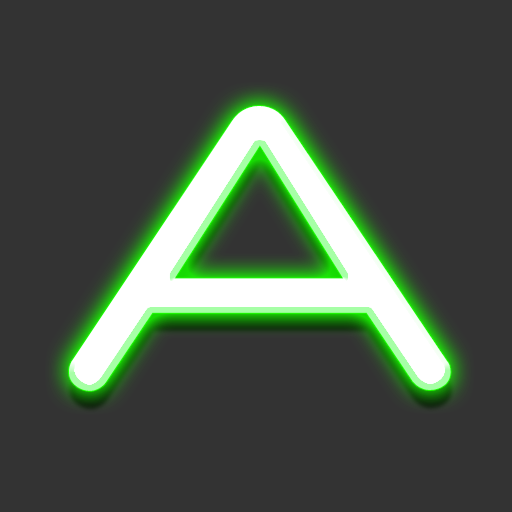
<style>
.page{position:relative;width:512px;height:512px;background:#333333}
.page>*{position:absolute;margin:0}
.t1{font:400px "NeuropolXFree";color:#ffffff}
</style>
<div class="page">
<p class="t1" style="left:69px;top:106px;width:382px;height:285px">A</p>
</div>
